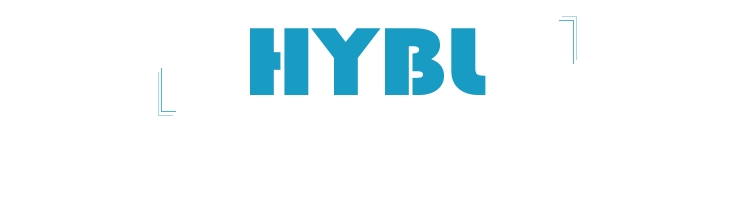
<style>
.page{position:relative;width:750px;height:200px;background:#ffffff}
.page>*{position:absolute;margin:0}
.t1{font:100px "STHupo";color:#199cc4;scale:1.2 1}
</style>
<div class="page">
<p class="t1" style="left:250px;top:28px;width:236px;height:67px">HYBL</p>
</div>
